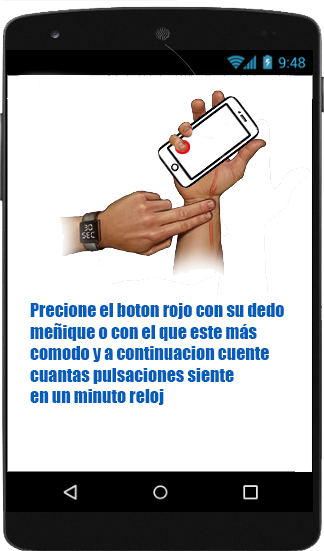
<style>
.page{position:relative;width:324px;height:551px;background:#ffffff}
.page>*{position:absolute;margin:0}
.t1{font:18px "Impact";color:#045dbb}
</style>
<div class="page">
<p class="t1" style="left:30px;top:303px;width:254px;height:102px">Precione el boton rojo con su dedo <br>meñique o con el que este más <br>comodo y a continuacion cuente <br>cuantas pulsaciones siente <br>en un minuto reloj</p>
</div>
